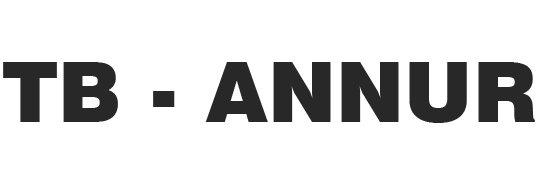
<style>
.page{position:relative;width:541px;height:185px;background:#ffffff}
.page>*{position:absolute;margin:0}
.t1{font:50.2px "Swiss721BT-Black";color:#282828}
</style>
<div class="page">
<p class="t1" style="left:3px;top:62px;width:532px;height:61px">TB - ANNUR</p>
</div>
